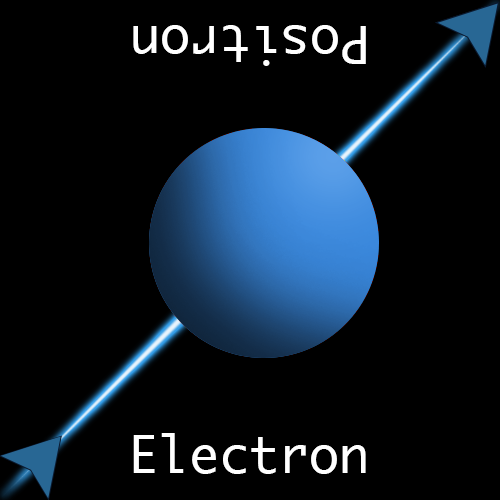
<style>
.page{position:relative;width:500px;height:500px;background:#000000}
.page>*{position:absolute;margin:0}
.t1{font:50px "Ayuthaya";color:#ffffff}
</style>
<div class="page">
<p class="t1" style="left:133px;top:25px;width:233px;height:41px;rotate:180deg">Positron</p>
<p class="t1" style="left:133px;top:433px;width:233px;height:41px">Electron</p>
</div>
